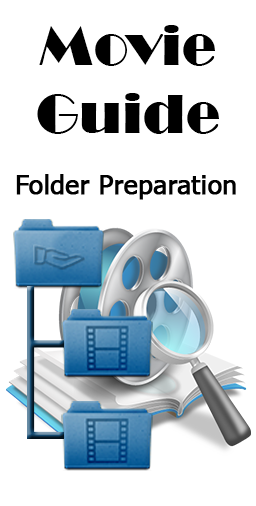
<style>
.page{position:relative;width:256px;height:506px;background:#ffffff}
.page>*{position:absolute;margin:0}
.t1{font:57px "Broadway";color:#000000}
.t2{font:26px "Tahoma";color:#000000;font-weight:bold}
</style>
<div class="page">
<p class="t1" style="left:37px;top:25px;width:182px;height:109px;text-align:center">Movie<br>Guide</p>
<p class="t2" style="left:16px;top:174px;width:220px;height:26px">Folder Preparation</p>
</div>
